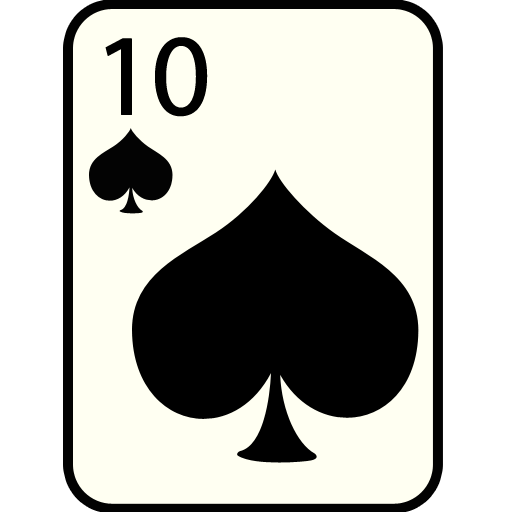
<style>
.page{position:relative;width:512px;height:512px;background:#fffff2}
.page>*{position:absolute;margin:0}
.t1{font:200px "MyriadPro-Regular";letter-spacing:-0.05em;color:#000000;font-variant:small-caps;font-weight:bold}
</style>
<div class="page">
<p class="t1" style="left:105px;top:37px;width:103px;height:80px">10</p>
</div>
